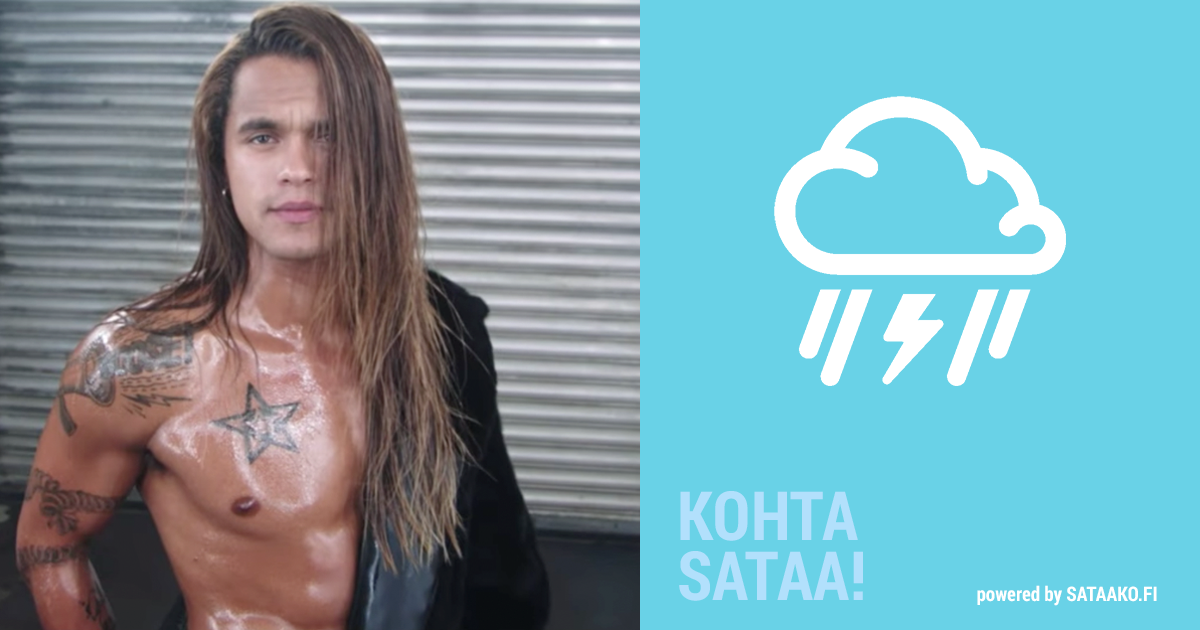
<style>
.page{position:relative;width:1200px;height:630px;background:#69d2e7}
.page>*{position:absolute;margin:0}
.t1{font:68px/60px "RobotoCondensed-Bold";color:#b2e0fc}
.t2{font:20px "RobotoCondensed-Bold";color:#ffffff}
</style>
<div class="page">
<p class="t1" style="left:679px;top:491px;width:184px;height:110px">KOHTA<br>SATAA!</p>
<p class="t2" style="left:977px;top:585px;width:180px;height:21px">powered by SATAAKO.FI</p>
</div>
